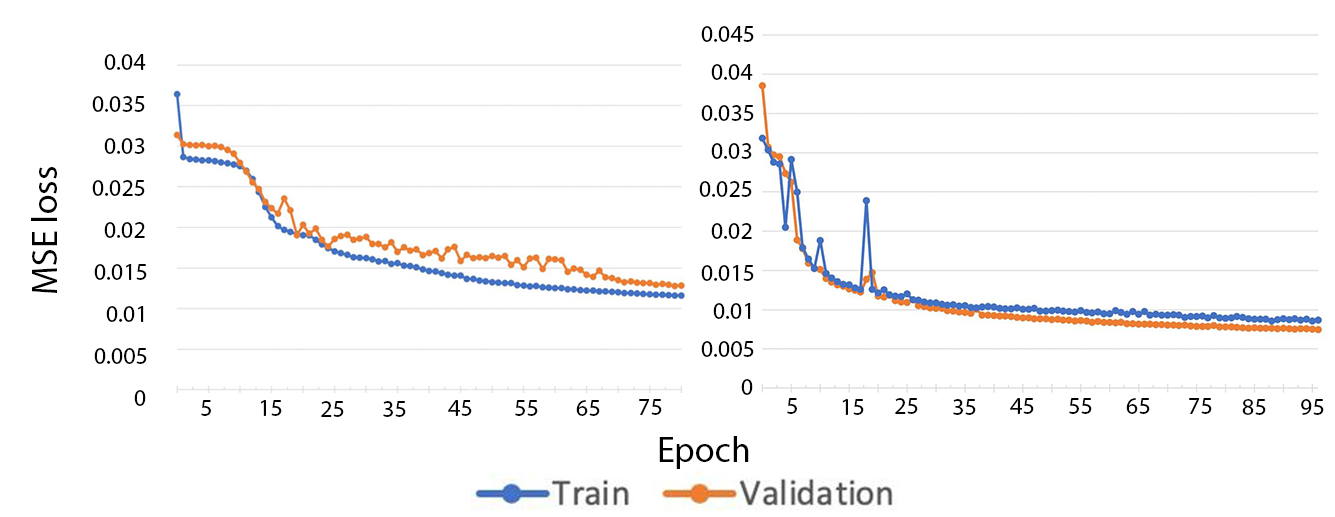
<style>
.page{position:relative;width:1335px;height:517px;background:#ffffff}
.page>*{position:absolute;margin:0}
.t1{font:24px "MyriadPro-Regular";color:#000000}
.t2{font:36px "MyriadPro-Regular";color:#000000}
</style>
<div class="page">
<p class="t1" style="left:701px;top:26px;width:53px;height:16px">0.045</p>
<p class="t1" style="left:104px;top:54px;width:42px;height:16px">0.04</p>
<p class="t1" style="left:711px;top:64px;width:42px;height:16px">0.04</p>
<p class="t1" style="left:92px;top:96px;width:53px;height:16px">0.035</p>
<p class="t1" style="left:701px;top:105px;width:53px;height:16px">0.035</p>
<p class="t1" style="left:104px;top:138px;width:41px;height:16px">0.03</p>
<p class="t1" style="left:711px;top:143px;width:41px;height:16px">0.03</p>
<p class="t2" style="left:31px;top:167px;width:26px;height:126px;rotate:-90deg">MSE loss</p>
<p class="t1" style="left:92px;top:180px;width:53px;height:16px">0.025</p>
<p class="t1" style="left:699px;top:181px;width:53px;height:16px">0.025</p>
<p class="t1" style="left:104px;top:222px;width:41px;height:16px">0.02</p>
<p class="t1" style="left:711px;top:223px;width:41px;height:16px">0.02</p>
<p class="t1" style="left:94px;top:264px;width:53px;height:16px">0.015</p>
<p class="t1" style="left:701px;top:265px;width:53px;height:16px">0.015</p>
<p class="t1" style="left:713px;top:303px;width:38px;height:16px">0.01</p>
<p class="t1" style="left:106px;top:306px;width:38px;height:16px">0.01</p>
<p class="t1" style="left:701px;top:341px;width:53px;height:16px">0.005</p>
<p class="t1" style="left:94px;top:348px;width:53px;height:16px">0.005</p>
<p class="t1" style="left:134px;top:390px;width:12px;height:16px">0</p>
<p class="t1" style="left:741px;top:379px;width:12px;height:16px">0</p>
<p class="t1" style="left:201px;top:400px;width:10px;height:16px">5</p>
<p class="t1" style="left:260px;top:400px;width:22px;height:16px">15</p>
<p class="t1" style="left:321px;top:401px;width:23px;height:16px">25</p>
<p class="t1" style="left:383px;top:401px;width:23px;height:16px">35</p>
<p class="t1" style="left:448px;top:400px;width:24px;height:16px">45</p>
<p class="t1" style="left:515px;top:400px;width:23px;height:16px">55</p>
<p class="t1" style="left:576px;top:400px;width:24px;height:16px">65</p>
<p class="t1" style="left:639px;top:399px;width:23px;height:16px">75</p>
<p class="t1" style="left:787px;top:398px;width:10px;height:16px">5</p>
<p class="t1" style="left:842px;top:399px;width:22px;height:16px">15</p>
<p class="t1" style="left:895px;top:398px;width:23px;height:16px">25</p>
<p class="t1" style="left:953px;top:399px;width:23px;height:16px">35</p>
<p class="t1" style="left:1010px;top:398px;width:24px;height:16px">45</p>
<p class="t1" style="left:1069px;top:398px;width:23px;height:16px">55</p>
<p class="t1" style="left:1126px;top:398px;width:24px;height:16px">65</p>
<p class="t1" style="left:1189px;top:398px;width:23px;height:16px">75</p>
<p class="t1" style="left:1242px;top:399px;width:24px;height:16px">85</p>
<p class="t1" style="left:1301px;top:399px;width:23px;height:16px">95</p>
<p class="t2" style="left:659px;top:436px;width:90px;height:33px">Epoch</p>
</div>
